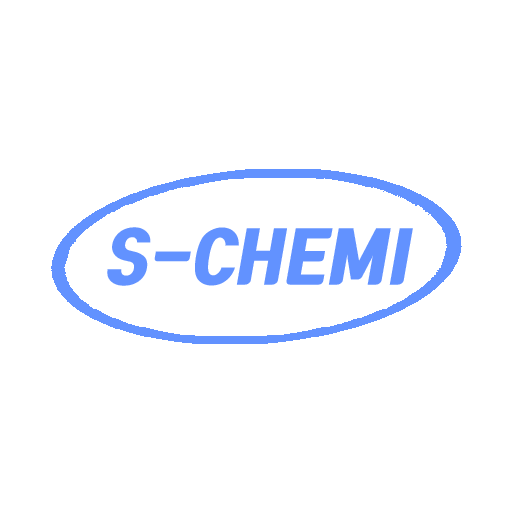
<style>
.page{position:relative;width:512px;height:512px;background:#ffffff}
.page>*{position:absolute;margin:0}
.t1{font:65px "TmonMonsoriBlack";color:#6292ff;font-style:italic}
</style>
<div class="page">
<p class="t1" style="left:107px;top:227px;width:306px;height:59px">S-CHEMI</p>
</div>
